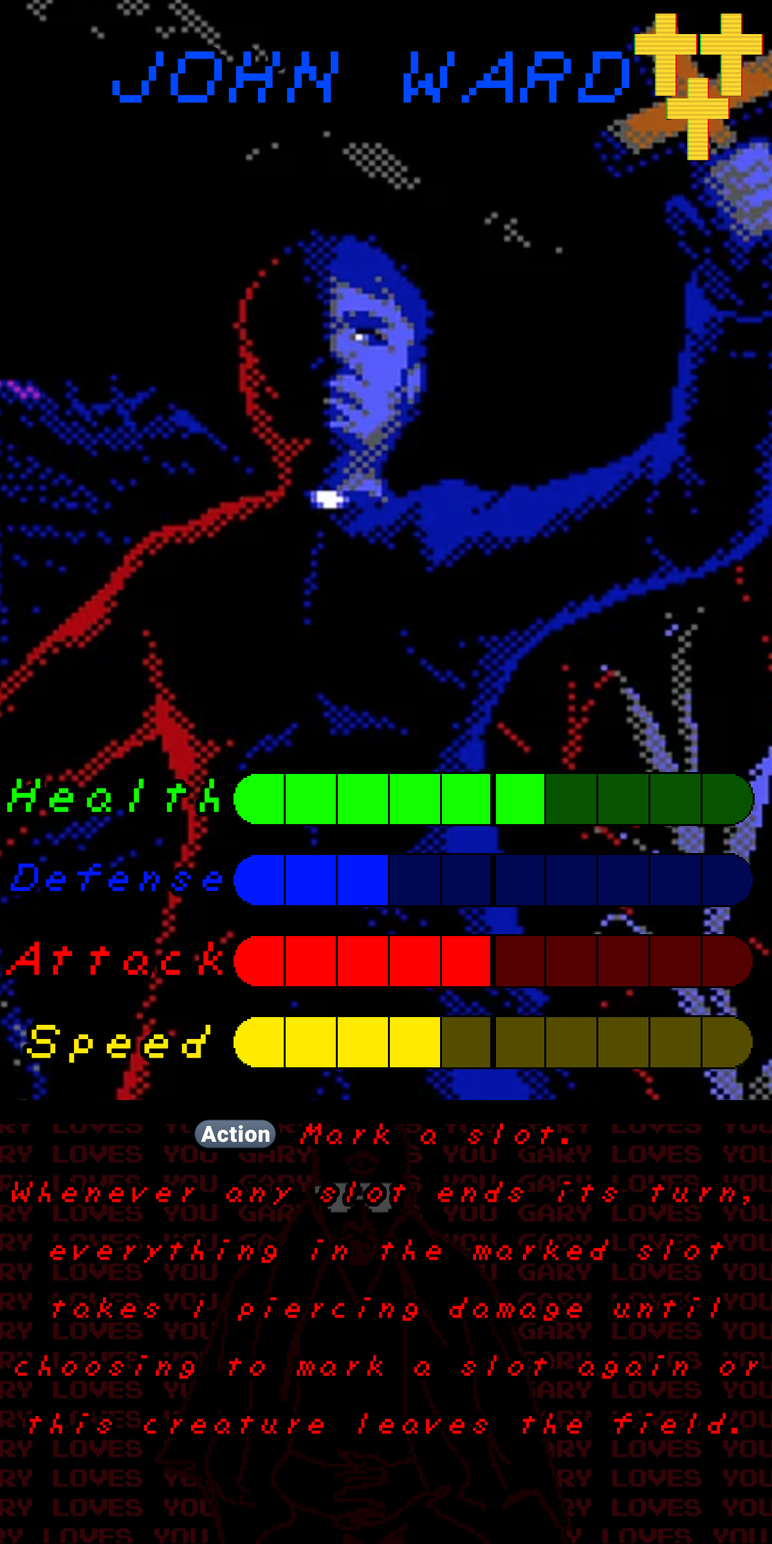
<style>
.page{position:relative;width:772px;height:1544px;background:#000000}
.page>*{position:absolute;margin:0}
.t1{font:143.5px "ZeldaDXTTBRK";color:#0048ff}
.t2{font:92.7px "ZeldaDXTTBRK";color:#12ff00}
.t3{font:77.2px "ZeldaDXTTBRK";color:#0018ff}
.t4{font:92.7px "ZeldaDXTTBRK";color:#ff0000}
.t5{font:92.7px "ZeldaDXTTBRK";color:#ffea00}
.t6{font:57.9px/57.9px "ZeldaDXTTBRK";color:#ff0000}
.t7{font:29.2px/57.9px "stoogedings-Regular";color:#ff0000}
</style>
<div class="page">
<p class="t1" style="left:112px;top:51px;width:517px;height:52px">JOHN WARD</p>
<p class="t2" style="left:7px;top:779px;width:212px;height:33px">Health</p>
<p class="t3" style="left:10px;top:864px;width:213px;height:27px">Defense</p>
<p class="t4" style="left:6px;top:941px;width:217px;height:34px">Attack</p>
<p class="t5" style="left:26px;top:1025px;width:184px;height:38px">Speed</p>
<p class="t6" style="left:12px;top:1120px;width:747px;height:314px;text-align:center"><span class="t7">(Action)</span> Mark a slot.<br>Whenever any slot ends its turn, everything in the marked slot takes 1 piercing damage until choosing to mark a slot again or this creature leaves the field.</p>
</div>
